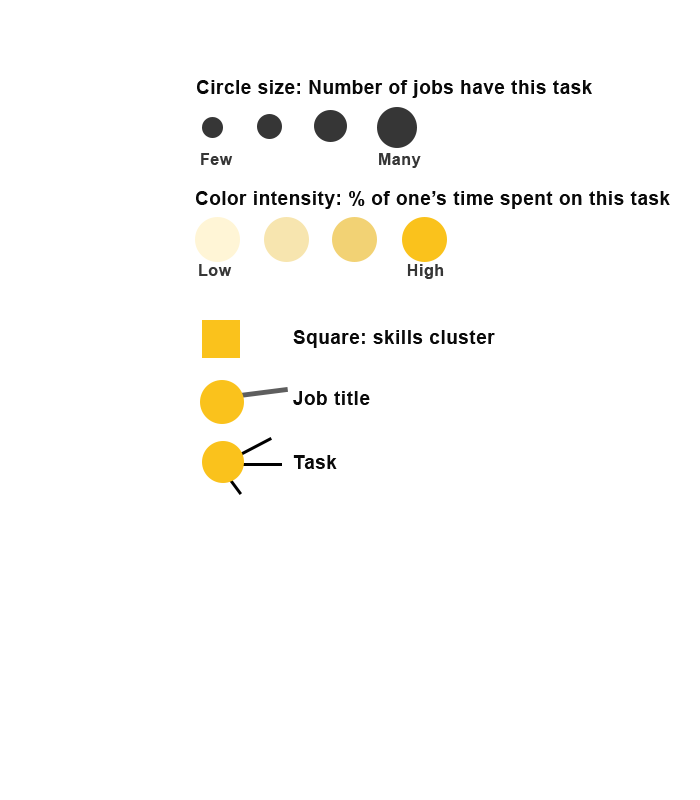
<style>
.page{position:relative;width:700px;height:800px;background:#ffffff}
.page>*{position:absolute;margin:0}
.t1{font:18.7px "Arial-BoldMT";letter-spacing:0.035em;color:#090909}
.t2{font:16px "Arial-BoldMT";letter-spacing:0.035em;color:#363636}
</style>
<div class="page">
<p class="t1" style="left:197px;top:80px;width:395px;height:18px">Circle size: Number of jobs have this task</p>
<p class="t2" style="left:201px;top:153px;width:220px;height:15px">Few                             Many</p>
<p class="t1" style="left:196px;top:191px;width:474px;height:18px">Color intensity: % of one’s time spent on this task</p>
<p class="t2" style="left:199px;top:264px;width:245px;height:15px">Low                                   High</p>
<p class="t1" style="left:293px;top:330px;width:202px;height:18px">Square: skills cluster</p>
<p class="t1" style="left:293px;top:391px;width:77px;height:14px">Job title</p>
<p class="t1" style="left:293px;top:455px;width:44px;height:14px">Task</p>
</div>
